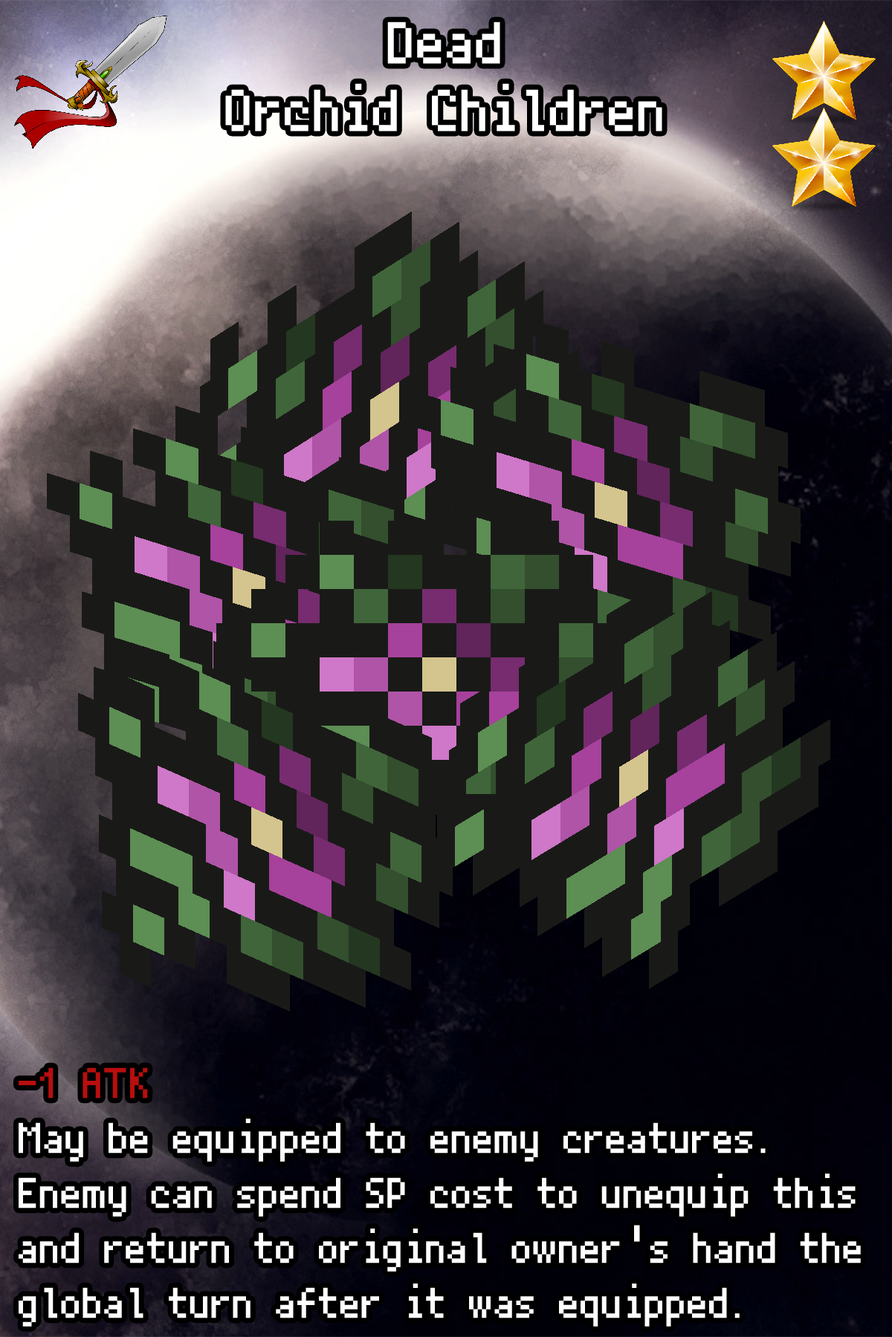
<style>
.page{position:relative;width:892px;height:1337px}
.page>*{position:absolute;margin:0}
.t1{font:101px/67.6px "PixelMplus10-Regular";color:#ffffff}
.t2{font:73.6px/55px "PixelMplus10-Regular";color:#ffffff}
.t3{font:73.6px/55px "PixelMplus10-Regular";color:#b80e0e}
.t4{font:73.6px/55px "PixelOperator8";color:#ffffff}
</style>
<div class="page">
<p class="t1" style="left:225px;top:22px;width:437px;height:110px;text-align:center">Dead<br>Orchid Children</p>
<p class="t2" style="left:19px;top:1068px;width:841px;height:259px"><span class="t3">-1 ATK<br></span>May be equipped to enemy creatures.<br>Enemy can spend SP cost to unequip this and return to original owner<span class="t4">'</span>s hand the global turn after it was equipped.</p>
</div>
